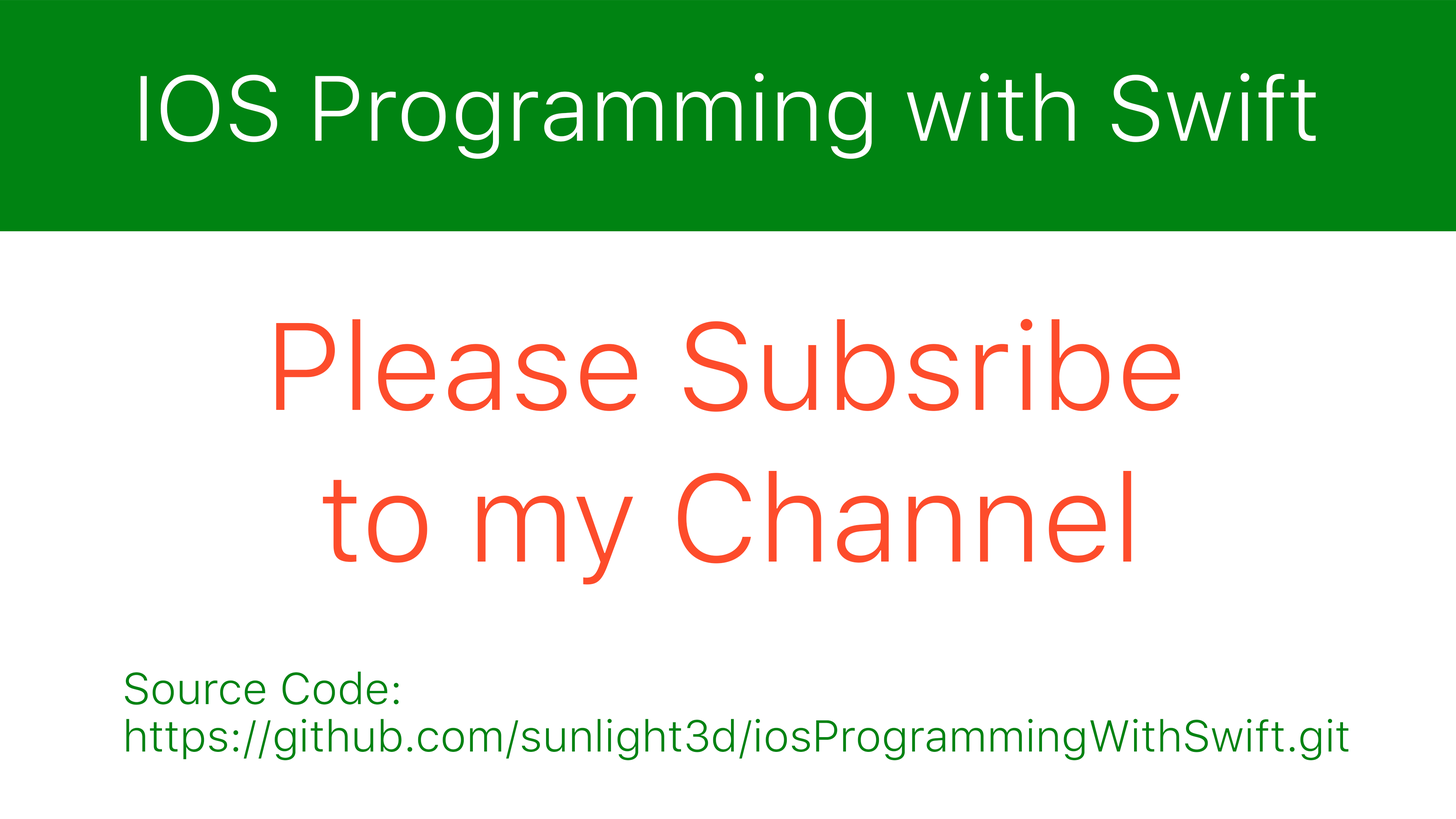
<style>
.page{position:relative;width:1456px;height:819px;background:#ffffff}
.page>*{position:absolute;margin:0}
.t1{font:91.6px "SFUIText-Light";color:#ffffff}
.t2{font:123.2px/37.9px "SFUIText-Light";color:#fd4c2b}
.t3{font:44.2px/47.4px "SFUIText-Light";color:#008312}
</style>
<div class="page">
<p class="t1" style="left:140px;top:73px;width:1176px;height:86px">IOS Programming with Swift</p>
<p class="t2" style="left:276px;top:319px;width:904px;height:266px;text-align:center">Please Subsribe <br><br><br><br>to my Channel</p>
<p class="t3" style="left:125px;top:671px;width:1224px;height:90px">Source Code:<br>https://github.com/sunlight3d/iosProgrammingWithSwift.git</p>
</div>
